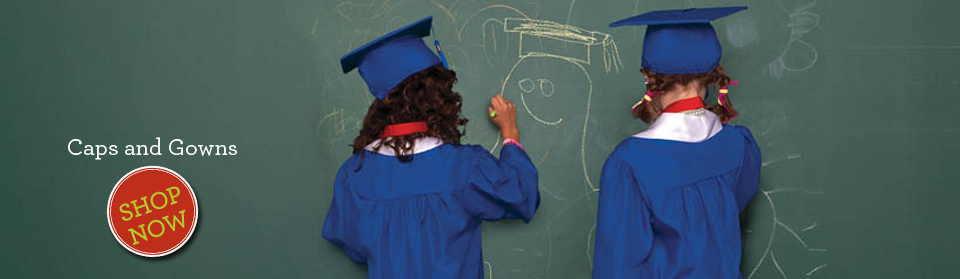
<style>
.page{position:relative;width:960px;height:279px}
.page>*{position:absolute;margin:0}
.t1{font:24px "Archer-Medium";color:#ffffff}
</style>
<div class="page">
<p class="t1" style="left:68px;top:137px;width:169px;height:23px">Caps and Gowns</p>
</div>
